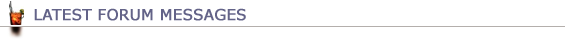
<style>
.page{position:relative;width:567px;height:42px;background:#ffffff}
.page>*{position:absolute;margin:0}
.t1{font:15px "Verdana";color:#636388;font-weight:bold}
</style>
<div class="page">
<p class="t1" style="left:34px;top:8px;width:212px;height:13px">LATEST FORUM MESSAGES</p>
</div>
